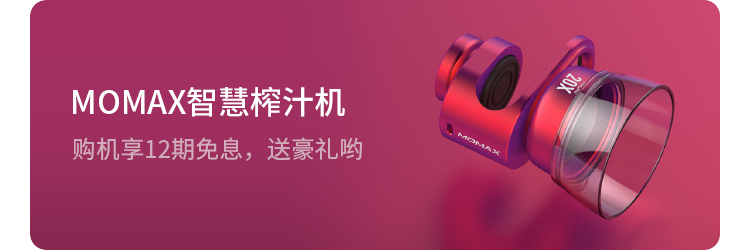
<style>
.page{position:relative;width:750px;height:250px}
.page>*{position:absolute;margin:0}
.t1{font:32px "SourceHanSansCN-Medium";color:#ffffff}
.t2{font:24px "SourceHanSansCN-Regular";color:#d2acba}
</style>
<div class="page">
<p class="t1" style="left:73px;top:86px;width:272px;height:31px">MOMAX智慧榨汁机</p>
<p class="t2" style="left:73px;top:137px;width:289px;height:24px">购机享12期免息，送豪礼哟</p>
</div>
